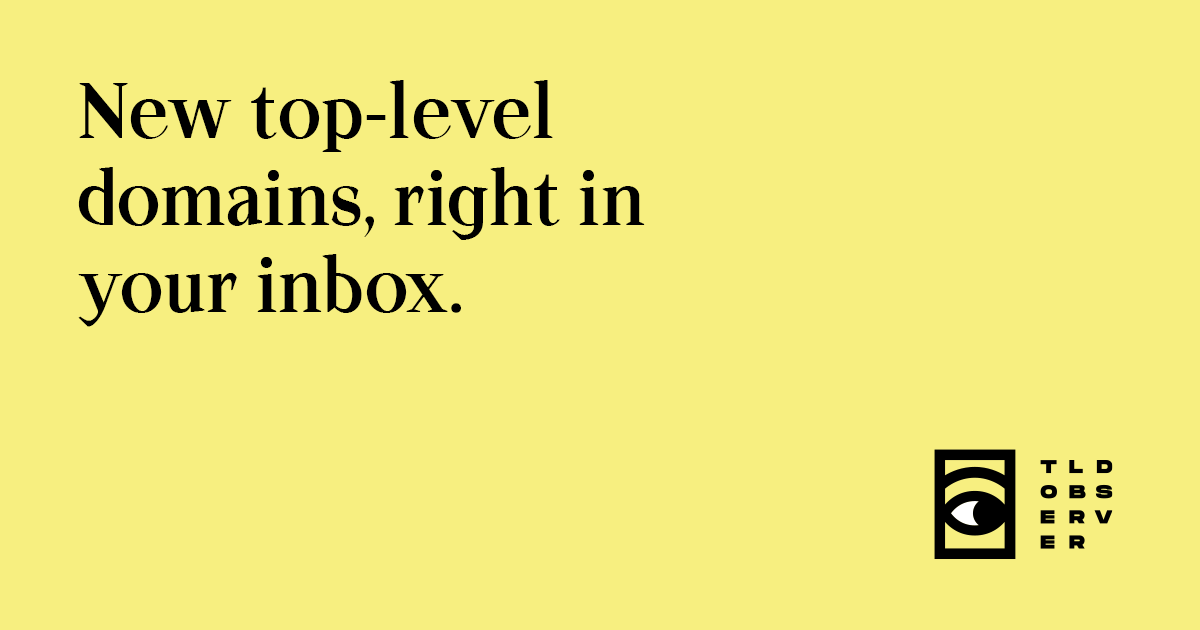
<style>
.page{position:relative;width:1200px;height:630px;background:#f7ef80}
.page>*{position:absolute;margin:0}
.t1{font:72.4px "ATApoc-Dark";color:#000000}
</style>
<div class="page">
<p class="t1" style="left:78px;top:80px;width:567px;height:247px">New top-level domains, right in your inbox.</p>
</div>
